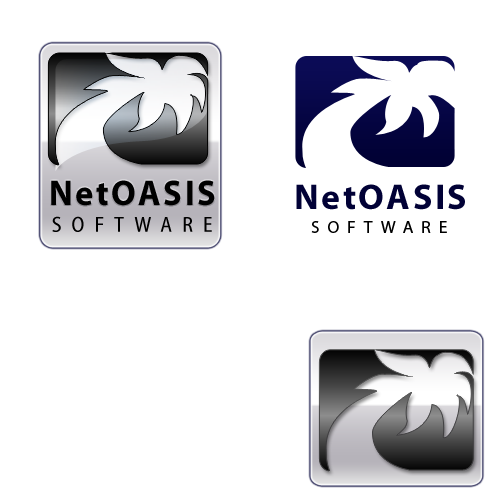
<style>
.page{position:relative;width:500px;height:500px;background:#ffffff}
.page>*{position:absolute;margin:0}
.t1{font:35.9px "MyriadPro-Bold";letter-spacing:0.075em;color:#000000;scale:0.96 1}
.t2{font:35.9px "MyriadPro-Bold";letter-spacing:0.075em;color:#010136}
.t3{font:21.6px "Myriad-CnWeb";letter-spacing:0.45em;color:#000000;scale:1.04 1}
.t4{font:17.5px "MyriadPro-Regular";letter-spacing:0.45em;color:#000000}
</style>
<div class="page">
<p class="t1" style="left:51px;top:180px;width:164px;height:26px">NetOASIS</p>
<p class="t2" style="left:296px;top:184px;width:169px;height:26px">NetOASIS</p>
<p class="t3" style="left:52px;top:216px;width:160px;height:16px">SOFTWARE</p>
<p class="t4" style="left:311px;top:221px;width:136px;height:12px">SOFTWARE</p>
</div>
